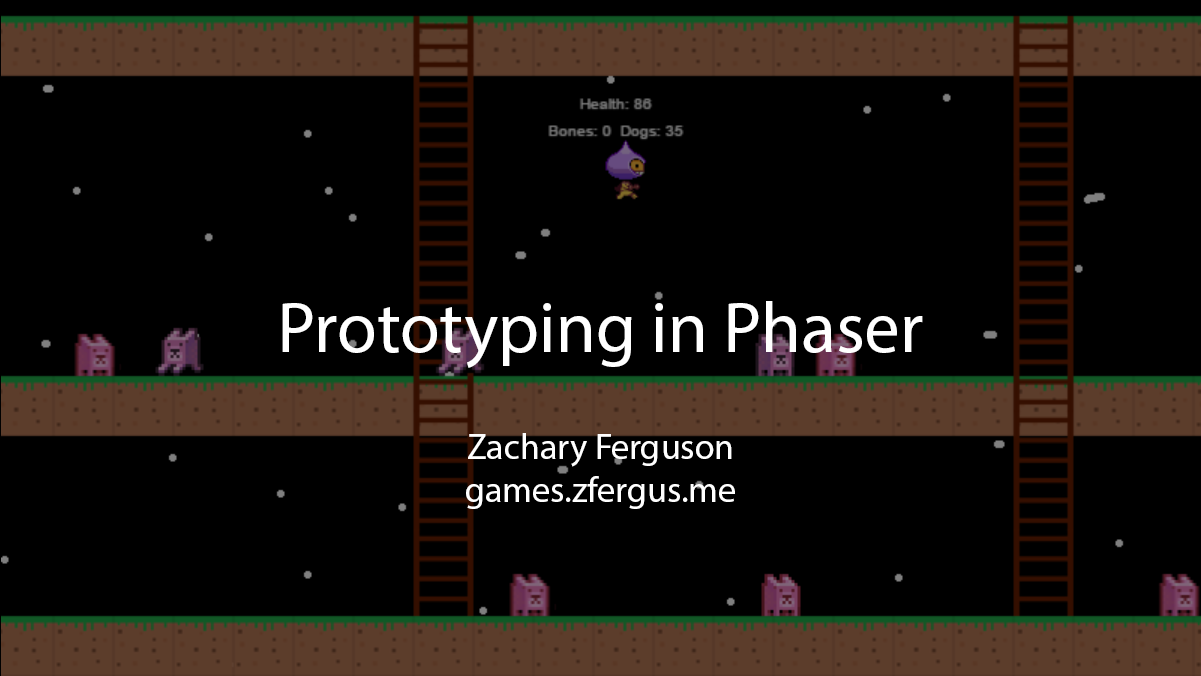
<style>
.page{position:relative;width:1201px;height:676px;background:#000000}
.page>*{position:absolute;margin:0}
.t1{font:72px "MyriadPro-Regular";color:#ffffff}
.t2{font:36px "MyriadPro-Regular";color:#ffffff}
</style>
<div class="page">
<p class="t1" style="left:282px;top:301px;width:641px;height:67px">Prototyping in Phaser</p>
<p class="t2" style="left:466px;top:433px;width:269px;height:76px;text-align:center">Zachary Ferguson<br>games.zfergus.me</p>
</div>
